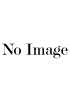
<style>
.page{position:relative;width:70px;height:100px;background:#ffffff}
.page>*{position:absolute;margin:0}
.t1{font:17px "Modern-Regular";color:#000000}
</style>
<div class="page">
<p class="t1" style="left:2px;top:43px;width:66px;height:16px">No Image</p>
</div>
